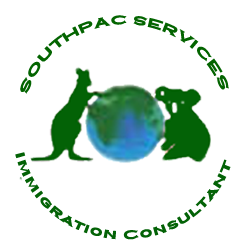
<style>
.page{position:relative;width:250px;height:250px;background:#ffffff}
.page>*{position:absolute;margin:0}
.t1{font:14px "CopperplateGothic-Bold";color:#036400}
.t2{font:14px "CopperplateGothic-Bold";color:#036206}
</style>
<div class="page">
<p class="t1" style="left:20px;top:15px;width:209px;height:79px">SOUTHPAC SERVICES</p>
<p class="t2" style="left:15px;top:152px;width:216px;height:88px">Immigration Consultant</p>
</div>
